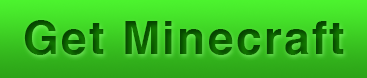
<style>
.page{position:relative;width:367px;height:78px}
.page>*{position:absolute;margin:0}
.t1{font:46px "Helvetica-Bold";letter-spacing:0.05em;color:#0b5d00}
</style>
<div class="page">
<p class="t1" style="left:24px;top:20px;width:320px;height:35px">Get Minecraft</p>
</div>
